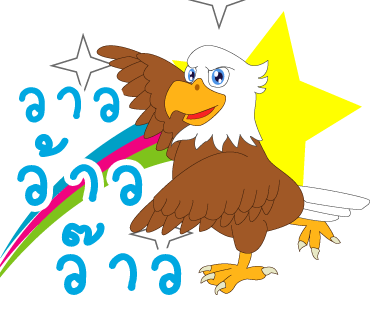
<style>
.page{position:relative;width:370px;height:320px;background:#ffffff}
.page>*{position:absolute;margin:0}
.t1{font:95px "2005_iannnnnMTV";letter-spacing:0.075em;color:#00a8e1;scale:1.06 1}
.t2{font:110px "2005_iannnnnMTV";letter-spacing:0.075em;color:#00a8e1;scale:1.06 1}
</style>
<div class="page">
<p class="t1" style="left:19px;top:86px;width:101px;height:37px">วาว</p>
<p class="t2" style="left:17px;top:134px;width:126px;height:72px">ว้าว</p>
<p class="t2" style="left:56px;top:222px;width:126px;height:73px">ว๊าว</p>
</div>
